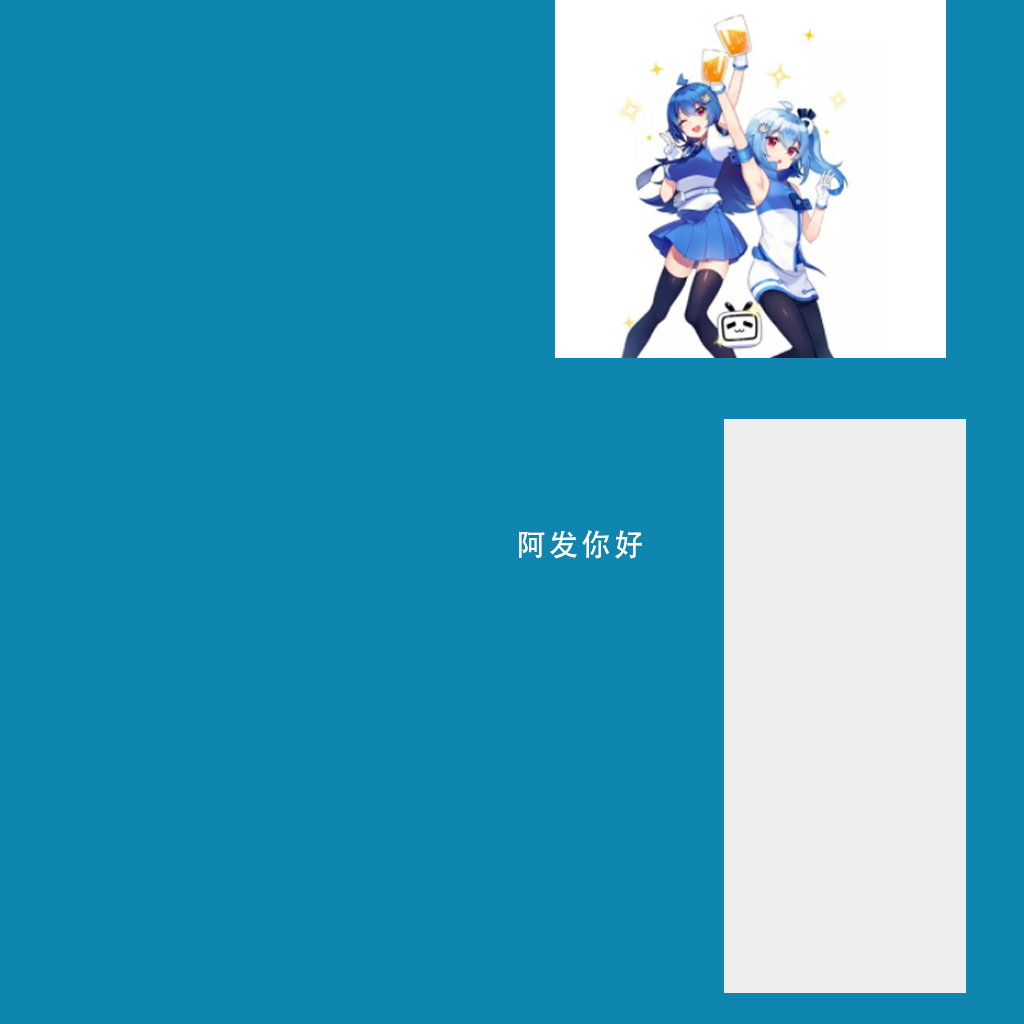
<style>
.page{position:relative;width:1024px;height:1024px;background:#0e86af}
.page>*{position:absolute;margin:0}
.t1{font:30.6px "AdobeHeitiStd-Regular";letter-spacing:0.1em;color:#ffffff;scale:0.97 1}
</style>
<div class="page">
<p class="t1" style="left:519px;top:530px;width:123px;height:29px">阿发你好</p>
</div>
